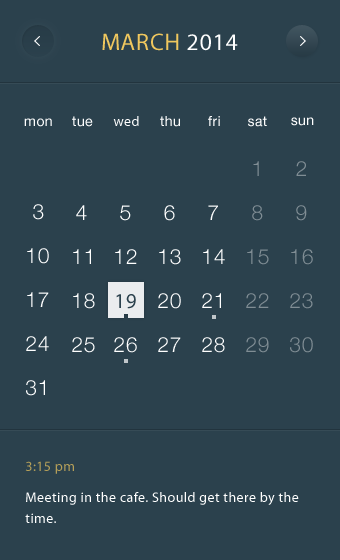
<style>
.page{position:relative;width:340px;height:560px;background:#2b414d}
.page>*{position:absolute;margin:0}
.t1{font:24px "MyriadPro-Regular";letter-spacing:0.03em;color:#efc75e;text-transform:uppercase}
.t2{font:24px "MyriadPro-Regular";letter-spacing:0.03em;color:#ffffff;text-transform:uppercase}
.t3{font:14px "HelveticaNeue";letter-spacing:0.03em;color:#ffffff}
.t4{font:14px "MyriadPro-Regular";letter-spacing:0.03em;color:#ffffff}
.t5{font:21px "HelveticaNeue-Light";letter-spacing:0.03em;color:#808d94}
.t6{font:21px "HelveticaNeue-Light";letter-spacing:0.03em;color:#ffffff}
.t7{font:21px "MyriadPro-Regular";letter-spacing:0.03em;color:#2b414d}
.t8{font:14px "MyriadPro-Regular";letter-spacing:0.03em;color:#b59f59}
.t9{font:14px/21px "MyriadPro-Regular";letter-spacing:0.03em;color:#ffffff}
</style>
<div class="page">
<p class="t1" style="left:102px;top:33px;width:136px;height:18px">march<span class="t2"> 2014</span></p>
<p class="t3" style="left:24px;top:118px;width:28px;height:9px">mon</p>
<p class="t3" style="left:72px;top:116px;width:21px;height:11px">tue</p>
<p class="t4" style="left:113px;top:116px;width:26px;height:10px">wed</p>
<p class="t3" style="left:160px;top:116px;width:20px;height:11px">thu</p>
<p class="t3" style="left:208px;top:116px;width:12px;height:10px">fri</p>
<p class="t3" style="left:248px;top:116px;width:19px;height:11px">sat</p>
<p class="t3" style="left:291px;top:117px;width:23px;height:9px">sun</p>
<p class="t5" style="left:253px;top:161px;width:6px;height:15px">1</p>
<p class="t5" style="left:296px;top:161px;width:10px;height:15px">2</p>
<p class="t6" style="left:33px;top:204px;width:11px;height:16px">3</p>
<p class="t6" style="left:76px;top:205px;width:11px;height:15px">4</p>
<p class="t6" style="left:120px;top:205px;width:11px;height:16px">5</p>
<p class="t6" style="left:164px;top:205px;width:11px;height:16px">6</p>
<p class="t6" style="left:208px;top:205px;width:10px;height:15px">7</p>
<p class="t5" style="left:252px;top:205px;width:11px;height:16px">8</p>
<p class="t5" style="left:296px;top:205px;width:11px;height:16px">9</p>
<p class="t6" style="left:27px;top:248px;width:22px;height:16px">10</p>
<p class="t6" style="left:73px;top:249px;width:18px;height:15px">11</p>
<p class="t6" style="left:115px;top:249px;width:22px;height:15px">12</p>
<p class="t6" style="left:159px;top:249px;width:22px;height:16px">13</p>
<p class="t6" style="left:203px;top:249px;width:22px;height:15px">14</p>
<p class="t5" style="left:247px;top:249px;width:22px;height:16px">15</p>
<p class="t5" style="left:291px;top:249px;width:22px;height:16px">16</p>
<p class="t6" style="left:27px;top:292px;width:22px;height:15px">17</p>
<p class="t6" style="left:73px;top:293px;width:22px;height:16px">18</p>
<p class="t7" style="left:116px;top:294px;width:20px;height:15px">19</p>
<p class="t6" style="left:158px;top:293px;width:23px;height:16px">20</p>
<p class="t6" style="left:202px;top:293px;width:19px;height:15px">21</p>
<p class="t5" style="left:246px;top:293px;width:23px;height:15px">22</p>
<p class="t5" style="left:290px;top:293px;width:23px;height:16px">23</p>
<p class="t6" style="left:26px;top:336px;width:23px;height:15px">24</p>
<p class="t6" style="left:72px;top:337px;width:23px;height:16px">25</p>
<p class="t6" style="left:114px;top:337px;width:23px;height:16px">26</p>
<p class="t6" style="left:158px;top:337px;width:23px;height:15px">27</p>
<p class="t6" style="left:202px;top:337px;width:23px;height:16px">28</p>
<p class="t5" style="left:246px;top:337px;width:23px;height:16px">29</p>
<p class="t5" style="left:290px;top:337px;width:23px;height:16px">30</p>
<p class="t6" style="left:26px;top:380px;width:19px;height:16px">31</p>
<p class="t8" style="left:25px;top:461px;width:49px;height:13px">3:15 pm</p>
<p class="t9" style="left:25px;top:492px;width:274px;height:31px">Meeting in the cafe. Should get there by the time.</p>
</div>
